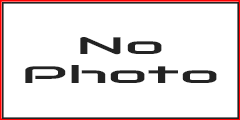
<style>
.page{position:relative;width:240px;height:120px;background:#ffffff}
.page>*{position:absolute;margin:0}
.t1{font:24px "Audiowide-Regular";color:#232323;scale:2.4 1}
</style>
<div class="page">
<p class="t1" style="left:25px;top:37px;width:192px;height:46px;text-align:center">No<br>Photo</p>
</div>
